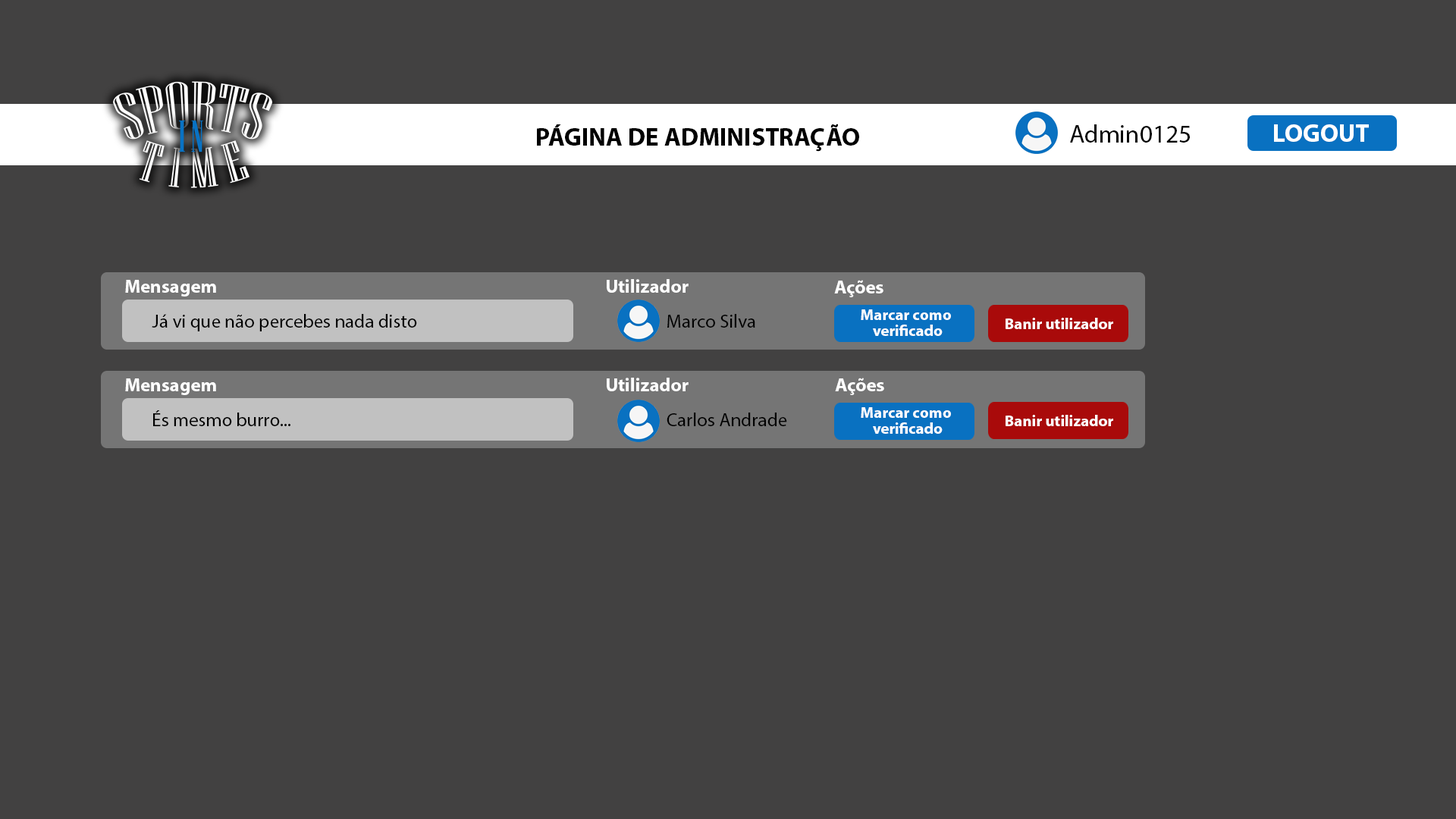
<style>
.page{position:relative;width:1456px;height:819px;background:#424141}
.page>*{position:absolute;margin:0}
.t1{font:25.3px "MyriadPro-Bold";color:#000000}
.t2{font:25.3px "MyriadPro-Regular";color:#000000}
.t3{font:19px "MyriadPro-Bold";color:#ffffff}
.t4{font:19px "MyriadPro-Regular";color:#000000}
</style>
<div class="page">
<p class="t1" style="left:537px;top:124px;width:322px;height:28px">PÁGINA DE ADMINISTRAÇÃO</p>
<p class="t2" style="left:1070px;top:124px;width:120px;height:19px">Admin0125</p>
<p class="t3" style="left:125px;top:280px;width:91px;height:17px">Mensagem</p>
<p class="t3" style="left:607px;top:279px;width:82px;height:14px">Utilizador</p>
<p class="t3" style="left:834px;top:280px;width:49px;height:17px">Ações</p>
<p class="t4" style="left:152px;top:314px;width:265px;height:17px">Já vi que não percebes nada disto</p>
<p class="t4" style="left:667px;top:314px;width:88px;height:14px">Marco Silva</p>
<p class="t3" style="left:607px;top:378px;width:82px;height:13px">Utilizador</p>
<p class="t3" style="left:835px;top:378px;width:49px;height:17px">Ações</p>
<p class="t3" style="left:125px;top:378px;width:91px;height:17px">Mensagem</p>
<p class="t4" style="left:153px;top:410px;width:137px;height:16px">És mesmo burro...</p>
<p class="t4" style="left:667px;top:413px;width:120px;height:13px">Carlos Andrade</p>
</div>
